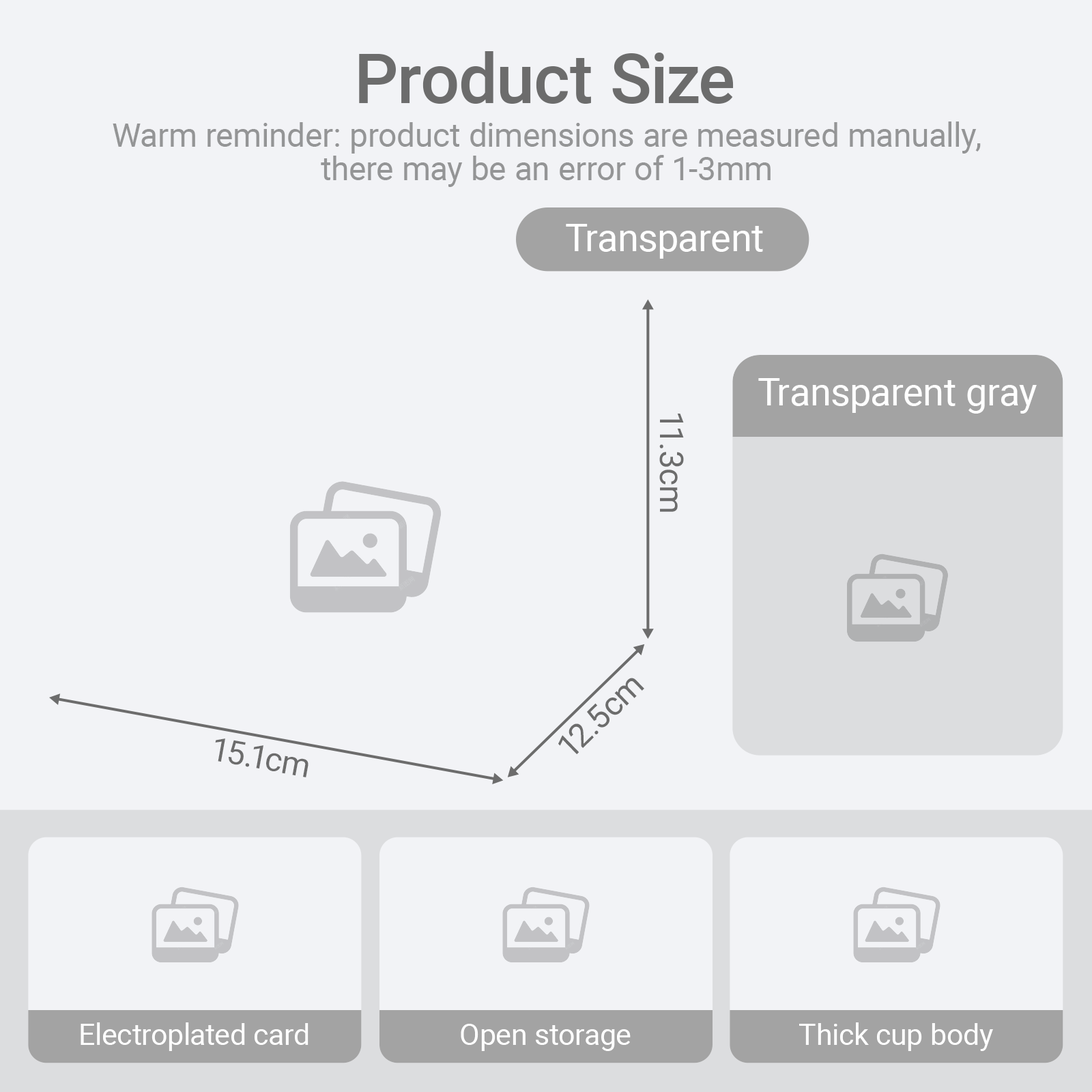
<style>
.page{position:relative;width:1092px;height:1092px;background:#f2f3f6}
.page>*{position:absolute;margin:0}
.t1{font:69.2px "Roboto-Medium";color:#6c6c6c}
.t2{font:32.8px/33.7px "Roboto-Regular";color:#949596}
.t3{font:38.2px "Roboto-Regular";color:#ffffff}
.t4{font:32.8px "Roboto-Regular";color:#6c6c6c}
.t5{font:29.1px "Roboto-Regular";color:#ffffff}
</style>
<div class="page">
<p class="t1" style="left:359px;top:51px;width:375px;height:53px">Product Size</p>
<p class="t2" style="left:113px;top:121px;width:868px;height:66px;text-align:center">Warm reminder: product dimensions are measured manually,<br>there may be an error of 1-3mm</p>
<p class="t3" style="left:566px;top:224px;width:197px;height:35px">Transparent</p>
<p class="t3" style="left:758px;top:378px;width:279px;height:36px">Transparent gray</p>
<p class="t4" style="left:659px;top:414px;width:25px;height:98px;rotate:90deg">11.3cm</p>
<p class="t4" style="left:558px;top:678px;width:86px;height:76px;rotate:-44deg">12.5cm</p>
<p class="t4" style="left:215px;top:738px;width:93px;height:39px;rotate:10deg">15.1cm</p>
<p class="t5" style="left:81px;top:1022px;width:227px;height:29px">Electroplated card</p>
<p class="t5" style="left:461px;top:1024px;width:170px;height:27px">Open storage</p>
<p class="t5" style="left:799px;top:1022px;width:194px;height:29px">Thick cup body</p>
</div>
